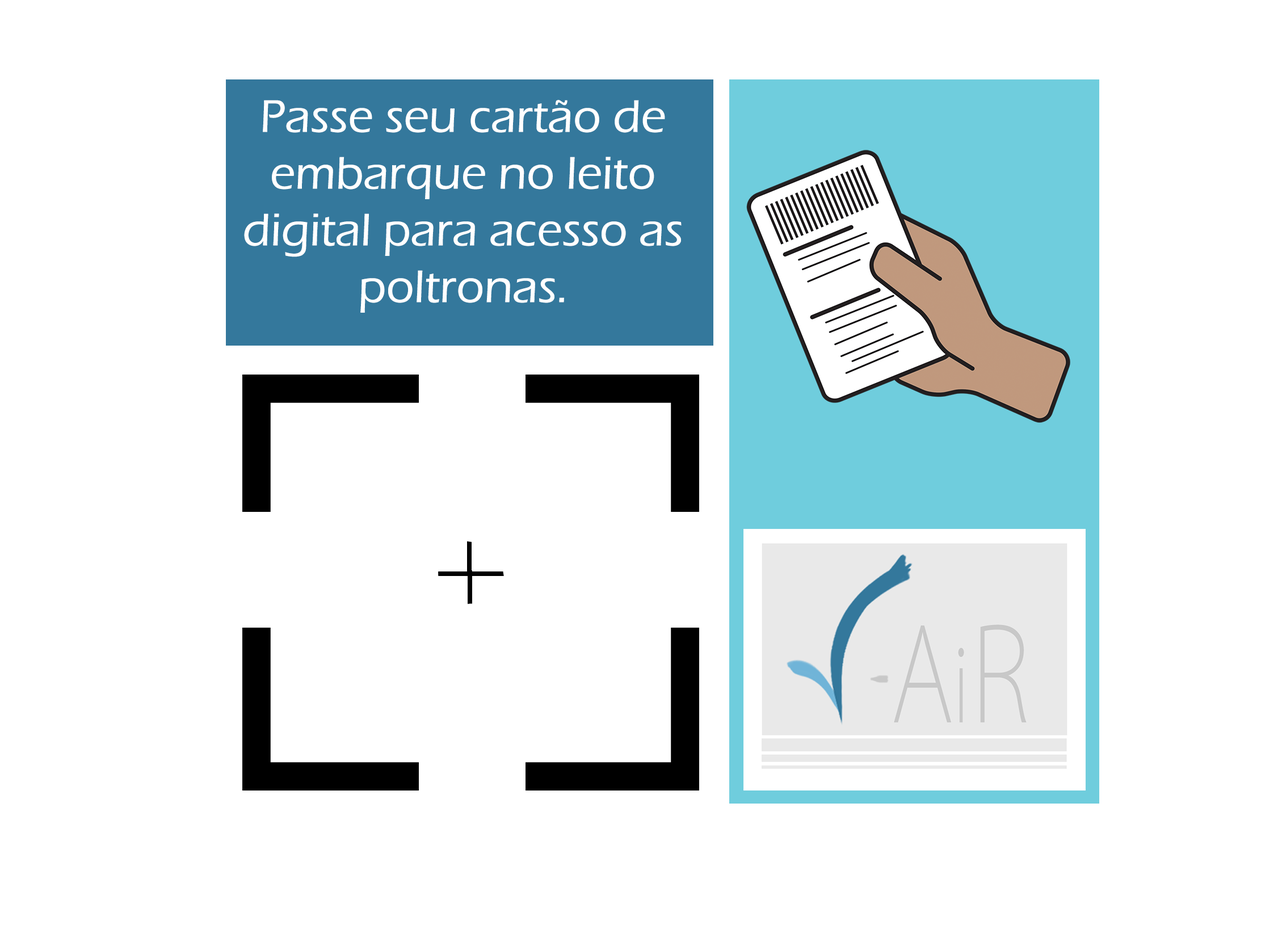
<style>
.page{position:relative;width:1261px;height:946px;background:#ffffff}
.page>*{position:absolute;margin:0}
.t1{font:47.3px "ErasITC-Medium";color:#ffffff}
</style>
<div class="page">
<p class="t1" style="left:244px;top:100px;width:437px;height:213px;text-align:center">Passe seu cartão de embarque no leito digital para acesso as poltronas.</p>
</div>
